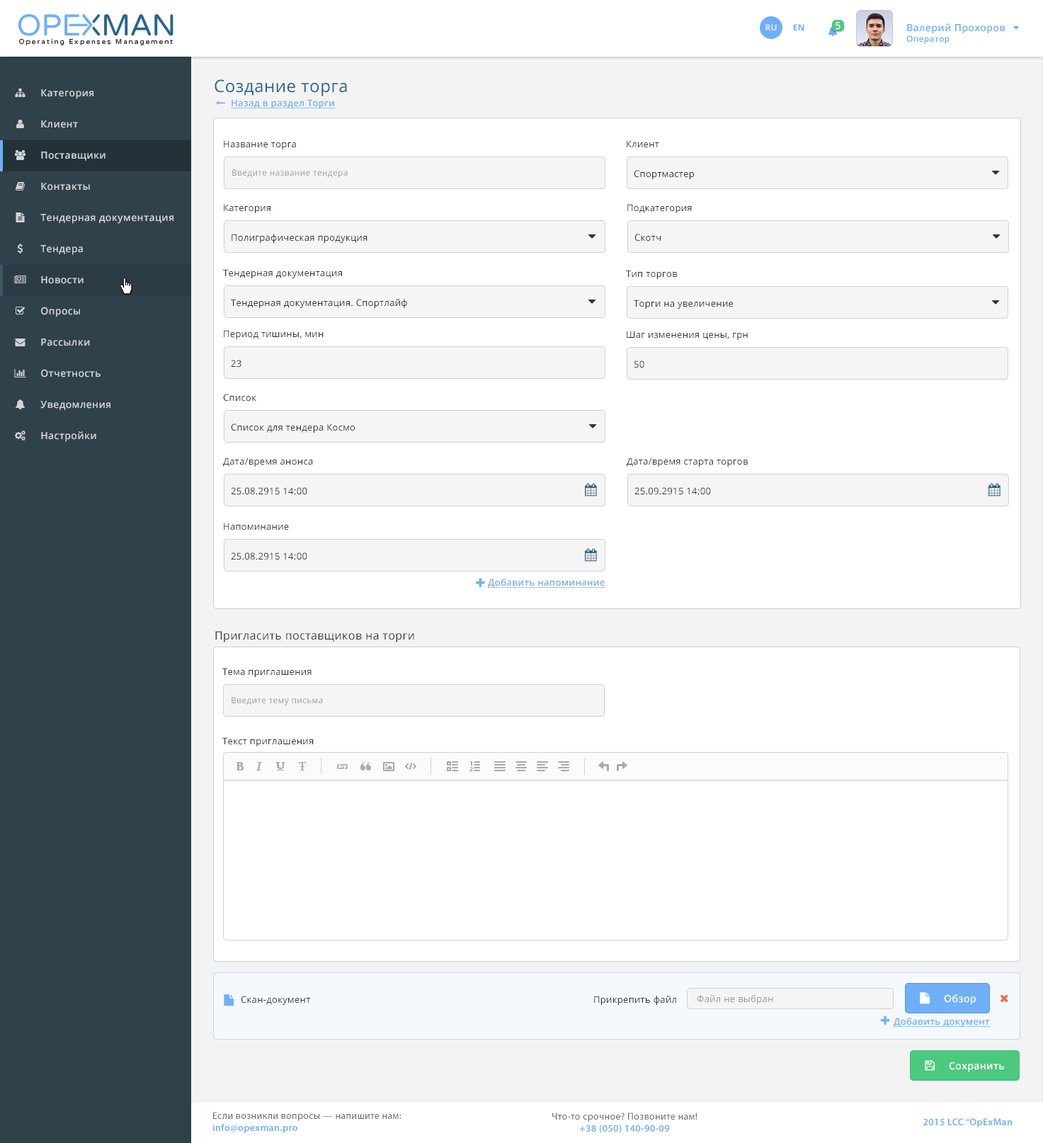
<style>
.page{position:relative;width:1043px;height:1143px;background:#ffffff}
.page>*{position:absolute;margin:0}
.t1{font:8.5px "OpenSans-Bold";letter-spacing:0.025em;color:#dbe9fd;text-transform:uppercase}
.t2{font:8.5px "OpenSans-Bold";letter-spacing:0.025em;color:#6faff8;text-transform:uppercase}
.t3{font:9.9px "OpenSans-Semibold";letter-spacing:0.025em;color:#ffffff}
.t4{font:9.9px "OpenSans-Semibold";letter-spacing:0.025em;color:#6eaef7}
.t5{font:8.5px "OpenSans-Semibold";letter-spacing:0.025em;color:#6eaef7}
.t6{font:9.9px "OpenSans-Semibold";letter-spacing:0.025em;color:#d2d5d7}
.t7{font:16.9px "OpenSans";letter-spacing:0.025em;color:#29658b}
.t8{font:9.2px "OpenSans-Semibold";letter-spacing:0.025em;color:#6faff8;text-decoration:underline}
.t9{font:9.2px "OpenSans";letter-spacing:0.025em;color:#333333}
.t10{font:8.5px "OpenSans";letter-spacing:0.025em;color:#999999}
.t11{font:11.3px "OpenSans";letter-spacing:0.025em;color:#333333}
.t12{font:9.2px "OpenSans";letter-spacing:0.025em;color:#999999}
.t13{font:9.9px "MyriadPro-Regular";letter-spacing:0.025em;color:#696969}
.t14{font:9.9px "MyriadPro-Semibold";letter-spacing:0.025em;color:#6eaef8}
</style>
<div class="page">
<p class="t1" style="left:766px;top:24px;width:11px;height:6px">Ru</p>
<p class="t2" style="left:793px;top:24px;width:12px;height:6px">EN</p>
<p class="t3" style="left:836px;top:22px;width:5px;height:8px">5</p>
<p class="t4" style="left:907px;top:23px;width:99px;height:21px">Валерий Прохоров<br><span class="t5">Оператор</span></p>
<p class="t6" style="left:41px;top:89px;width:52px;height:10px">Категория</p>
<p class="t7" style="left:215px;top:79px;width:132px;height:17px">Создание торга</p>
<p class="t8" style="left:231px;top:99px;width:105px;height:9px">Назад в раздел Торги</p>
<p class="t6" style="left:41px;top:120px;width:37px;height:8px">Клиент</p>
<p class="t9" style="left:224px;top:140px;width:72px;height:9px">Название торга</p>
<p class="t9" style="left:627px;top:140px;width:32px;height:8px">Клиент</p>
<p class="t6" style="left:41px;top:152px;width:65px;height:9px">Поставщики</p>
<p class="t10" style="left:232px;top:169px;width:116px;height:9px">Введите название тендера</p>
<p class="t9" style="left:634px;top:170px;width:60px;height:9px">Спортмастер</p>
<p class="t6" style="left:41px;top:183px;width:49px;height:8px">Контакты</p>
<p class="t9" style="left:224px;top:204px;width:47px;height:9px">Категория</p>
<p class="t9" style="left:627px;top:204px;width:65px;height:9px">Подкатегория</p>
<p class="t6" style="left:40px;top:214px;width:134px;height:10px">Тендерная документация</p>
<p class="t9" style="left:232px;top:234px;width:136px;height:9px">Полиграфическая продукция</p>
<p class="t9" style="left:635px;top:234px;width:26px;height:8px">Скотч</p>
<p class="t6" style="left:40px;top:245px;width:43px;height:10px">Тендера</p>
<p class="t9" style="left:223px;top:269px;width:119px;height:9px">Тендерная документация</p>
<p class="t9" style="left:626px;top:270px;width:51px;height:9px">Тип торгов</p>
<p class="t6" style="left:41px;top:276px;width:43px;height:8px">Новости</p>
<p class="t9" style="left:231px;top:299px;width:176px;height:9px">Тендерная документация. Спортлайф</p>
<p class="t9" style="left:634px;top:300px;width:99px;height:9px">Торги на увеличение</p>
<p class="t6" style="left:41px;top:307px;width:39px;height:10px">Опросы</p>
<p class="t6" style="left:41px;top:339px;width:49px;height:7px">Рассылки</p>
<p class="t9" style="left:224px;top:330px;width:100px;height:9px">Период тишины, мин</p>
<p class="t9" style="left:627px;top:331px;width:121px;height:9px">Шаг изменения цены, грн</p>
<p class="t9" style="left:231px;top:360px;width:11px;height:8px">23</p>
<p class="t9" style="left:634px;top:360px;width:10px;height:8px">50</p>
<p class="t6" style="left:41px;top:369px;width:60px;height:8px">Отчетность</p>
<p class="t6" style="left:40px;top:401px;width:70px;height:9px">Уведомления</p>
<p class="t9" style="left:223px;top:394px;width:33px;height:8px">Список</p>
<p class="t9" style="left:231px;top:424px;width:124px;height:9px">Список для тендера Космо</p>
<p class="t6" style="left:41px;top:431px;width:55px;height:11px">Настройки</p>
<p class="t9" style="left:223px;top:458px;width:90px;height:9px">Дата/время анонса</p>
<p class="t9" style="left:627px;top:458px;width:121px;height:9px">Дата/время старта торгов</p>
<p class="t9" style="left:231px;top:487px;width:76px;height:8px">25.08.2915 14:00</p>
<p class="t9" style="left:635px;top:487px;width:76px;height:8px">25.09.2915 14:00</p>
<p class="t9" style="left:224px;top:523px;width:65px;height:7px">Напоминание</p>
<p class="t9" style="left:231px;top:552px;width:76px;height:8px">25.08.2915 14:00</p>
<p class="t8" style="left:488px;top:579px;width:118px;height:9px">Добавить напоминание</p>
<p class="t11" style="left:215px;top:631px;width:199px;height:11px">Пригласить поставщиков на торги</p>
<p class="t9" style="left:222px;top:668px;width:90px;height:9px">Тема приглашения</p>
<p class="t10" style="left:232px;top:697px;width:91px;height:8px">Введите тему письма</p>
<p class="t9" style="left:222px;top:737px;width:92px;height:9px">Текст приглашения</p>
<p class="t9" style="left:241px;top:996px;width:69px;height:9px">Скан-документ</p>
<p class="t9" style="left:594px;top:996px;width:82px;height:9px">Прикрепить файл</p>
<p class="t12" style="left:697px;top:995px;width:76px;height:9px">Файл не выбран</p>
<p class="t3" style="left:944px;top:994px;width:32px;height:11px">Обзор</p>
<p class="t8" style="left:894px;top:1018px;width:96px;height:9px">Добавить документ</p>
<p class="t3" style="left:949px;top:1062px;width:55px;height:10px">Сохранить</p>
<p class="t13" style="left:212px;top:1112px;width:190px;height:21px">Если возникли вопросы — напишите нам:<br><span class="t14">info@opexman.pro</span></p>
<p class="t13" style="left:552px;top:1113px;width:146px;height:20px;text-align:center">Что-то срочное? Позвоните нам!<br><span class="t14">+38 (050) 140-90-09</span></p>
<p class="t14" style="left:924px;top:1118px;width:88px;height:9px">2015 LCC “OpExMan</p>
</div>
